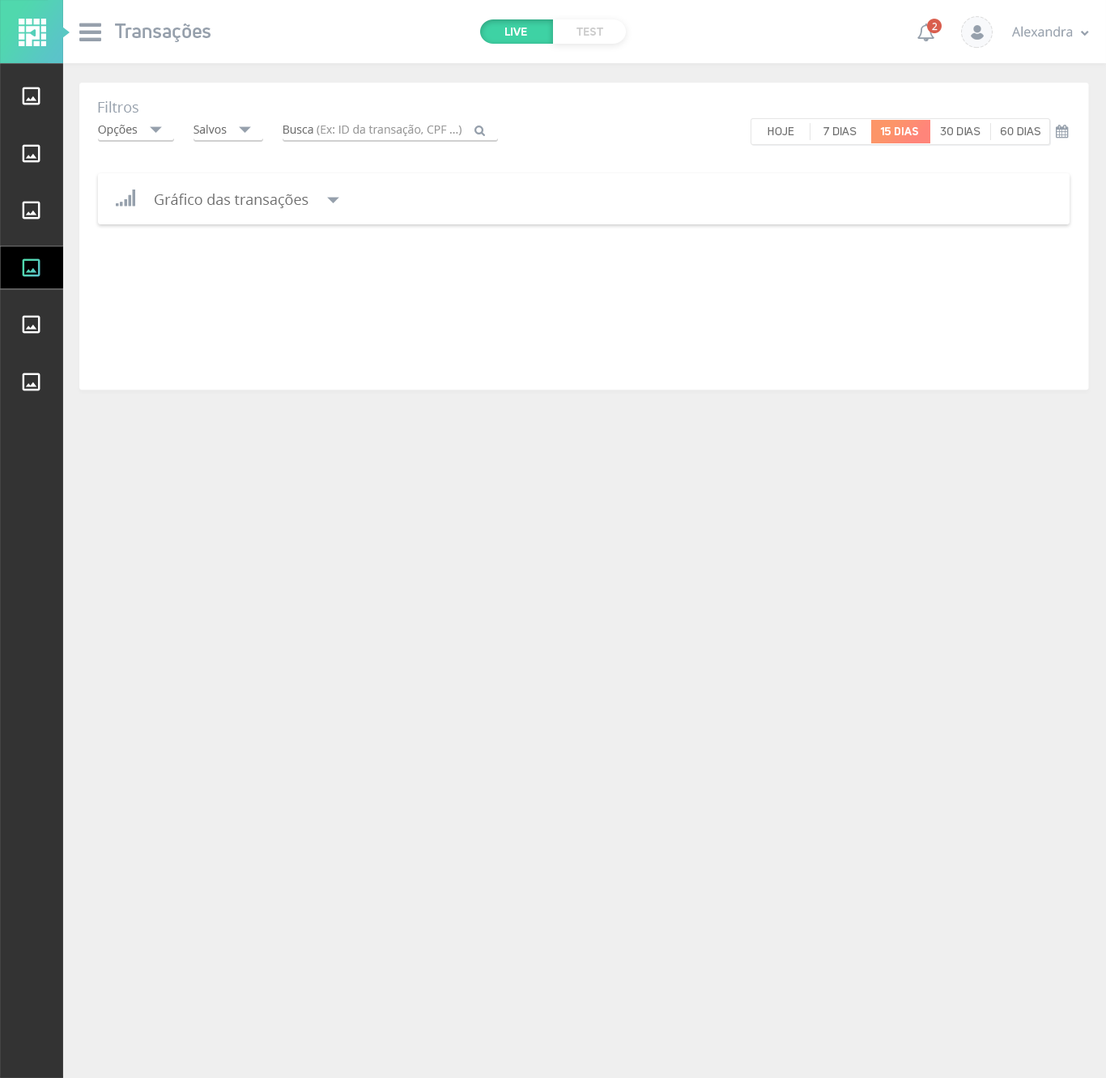
<style>
.page{position:relative;width:1106px;height:1078px;background:#efefef}
.page>*{position:absolute;margin:0}
.t1{font:19.4px "UniNeueBold";color:#96a0ac}
.t2{font:11.3px "UniNeueBold";color:#ffffff;text-transform:uppercase}
.t3{font:11.3px "UniNeueBold";color:#cccccc;text-transform:uppercase}
.t4{font:9.7px "OpenSans";color:#ffffff}
.t5{font:13px "OpenSans";color:#96a0ac}
.t6{font:14.6px "OpenSans";color:#96a0ac}
.t7{font:11.3px "OpenSans";color:#6f6f6f}
.t8{font:11.3px "OpenSans";color:#999999}
.t9{font:11.3px "UniNeueRegular";color:#6f6f6f;text-transform:uppercase}
.t10{font:14.6px "OpenSans";color:#6f6f6f}
</style>
<div class="page">
<p class="t1" style="left:115px;top:23px;width:96px;height:19px">Transações</p>
<p class="t2" style="left:505px;top:28px;width:22px;height:8px">Live</p>
<p class="t3" style="left:577px;top:28px;width:26px;height:8px">Test</p>
<p class="t4" style="left:932px;top:23px;width:6px;height:8px">2</p>
<p class="t5" style="left:1012px;top:26px;width:61px;height:11px">Alexandra</p>
<p class="t6" style="left:98px;top:101px;width:40px;height:12px">Filtros</p>
<p class="t7" style="left:98px;top:125px;width:40px;height:11px">Opções</p>
<p class="t7" style="left:194px;top:125px;width:33px;height:9px">Salvos</p>
<p class="t8" style="left:283px;top:125px;width:179px;height:11px"><span class="t7">Busca</span> (Ex: ID da transação, CPF ...)</p>
<p class="t9" style="left:768px;top:127px;width:26px;height:8px">hoje</p>
<p class="t9" style="left:824px;top:127px;width:33px;height:8px">7 dias</p>
<p class="t2" style="left:880px;top:127px;width:38px;height:8px">15 dias</p>
<p class="t9" style="left:940px;top:127px;width:41px;height:8px">30 dias</p>
<p class="t9" style="left:1001px;top:127px;width:40px;height:8px">60 dias</p>
<p class="t10" style="left:155px;top:194px;width:154px;height:14px">Gráfico das transações</p>
</div>
